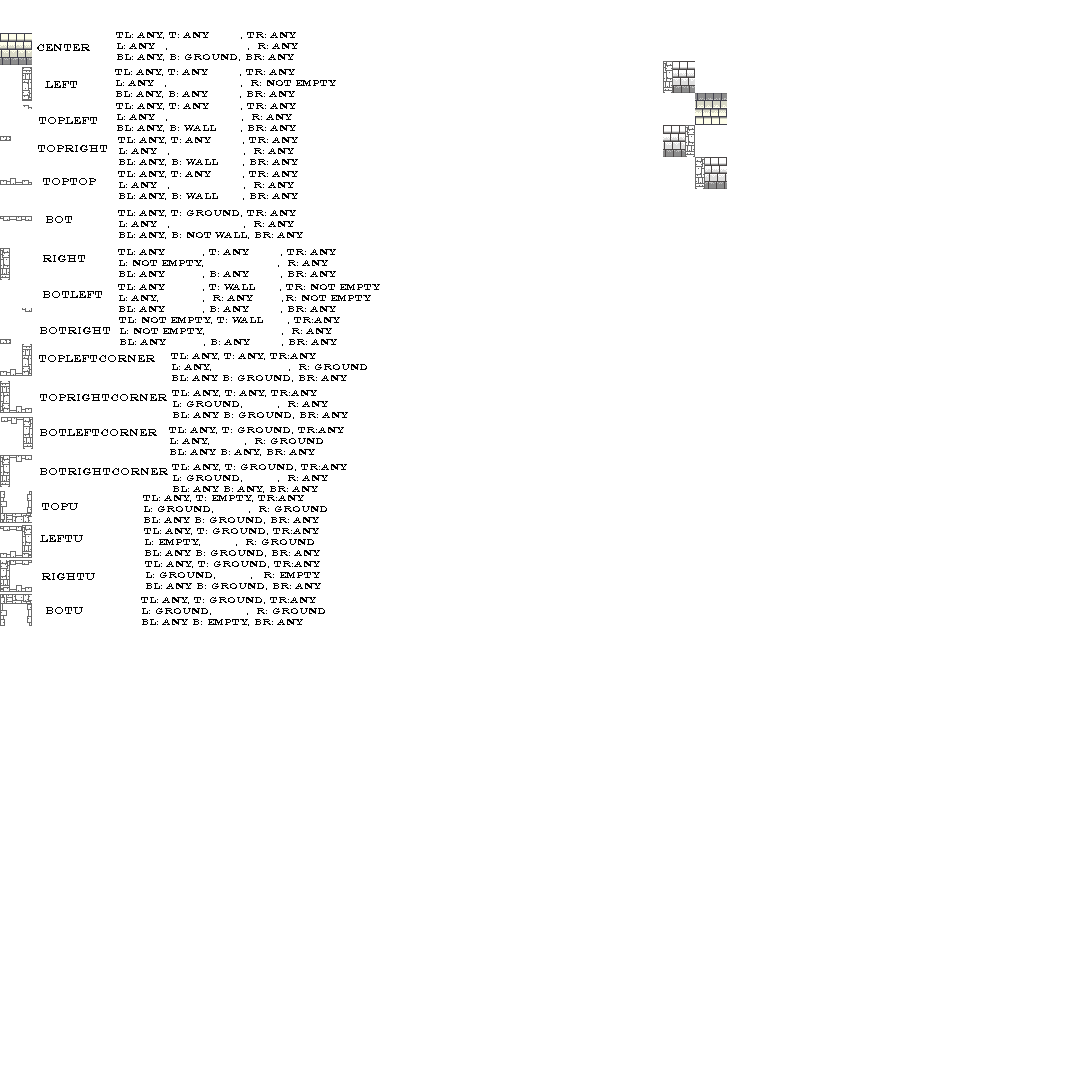
<style>
.page{position:relative;width:1080px;height:1080px;background:#ffffff}
.page>*{position:absolute;margin:0}
.t1{font:9px "EngraversMT";color:#000000}
.t2{font:10px "EngraversMT";color:#000000}
</style>
<div class="page">
<p class="t1" style="left:116px;top:32px;width:182px;height:29px">TL: Any, T: Any          , TR: Any<br>L: Any   ,                          ,  R: ANy<br>BL: Any, B: Ground, BR: Any</p>
<p class="t2" style="left:37px;top:44px;width:53px;height:7px">Center</p>
<p class="t1" style="left:115px;top:69px;width:221px;height:29px">TL: Any, T: Any          , TR: Any<br>L: Any   ,                        ,  R: not empty<br>BL: Any, B: any          , BR: Any</p>
<p class="t2" style="left:45px;top:81px;width:32px;height:7px">Left</p>
<p class="t1" style="left:116px;top:103px;width:180px;height:29px">TL: Any, T: Any          , TR: Any<br>L: Any   ,                        ,  R: Any<br>BL: Any, B: Wall        , BR: Any</p>
<p class="t2" style="left:39px;top:117px;width:58px;height:7px">TopLEFT</p>
<p class="t1" style="left:118px;top:137px;width:180px;height:29px">TL: Any, T: Any          , TR: Any<br>L: Any   ,                        ,  R: Any<br>BL: Any, B: Wall        , BR: Any</p>
<p class="t2" style="left:38px;top:145px;width:69px;height:7px">TopRight</p>
<p class="t1" style="left:118px;top:171px;width:180px;height:29px">TL: Any, T: Any          , TR: Any<br>L: Any   ,                        ,  R: ANY<br>BL: Any, B: Wall        , BR: Any</p>
<p class="t2" style="left:43px;top:178px;width:53px;height:7px">TopTop</p>
<p class="t2" style="left:46px;top:216px;width:26px;height:7px">Bot</p>
<p class="t1" style="left:118px;top:210px;width:185px;height:29px">TL: Any, T: Ground, TR: Any<br>L: Any   ,                        ,  R: ANY<br>BL: Any, B: Not WALL, BR: Any</p>
<p class="t2" style="left:43px;top:255px;width:42px;height:7px">Right</p>
<p class="t1" style="left:118px;top:249px;width:218px;height:29px">TL: Any            , T: Any          , TR: Any<br>L: Not Empty,                        ,  R: ANY<br>BL: Any            , B: any          , BR: Any</p>
<p class="t2" style="left:43px;top:291px;width:59px;height:7px">BotLEft</p>
<p class="t1" style="left:118px;top:284px;width:262px;height:29px">TL: Any            , T: Wall        , TR: Not Empty<br>L: any,              ,  R: ANY         ,R: Not Empty<br>BL: Any            , B: any          , BR: Any</p>
<p class="t1" style="left:119px;top:317px;width:221px;height:29px">TL: Not Empty, T: Wall        , TR:Any <br>L: Not Empty,                         ,  R: ANY<br>BL: Any            , B: any          , BR: Any</p>
<p class="t2" style="left:40px;top:327px;width:70px;height:7px">BotRight</p>
<p class="t1" style="left:171px;top:353px;width:196px;height:29px">TL: ANY, T: ANY, TR:Any <br>L: ANY,                         ,  R: Ground<br>BL: Any B: Ground, BR: Any</p>
<p class="t2" style="left:39px;top:355px;width:116px;height:7px">TopLeftCorner</p>
<p class="t1" style="left:172px;top:390px;width:176px;height:29px">TL: ANY, T: ANY, TR:Any <br>L: Ground,           ,  R: Any<br>BL: Any B: Ground, BR: Any</p>
<p class="t2" style="left:40px;top:394px;width:127px;height:7px">TOPRightCORNER</p>
<p class="t2" style="left:40px;top:429px;width:117px;height:7px">BotLeftCorner</p>
<p class="t1" style="left:169px;top:427px;width:175px;height:29px">TL: ANY, T: Ground, TR:Any <br>L: ANY,           ,  R: Ground<br>BL: Any B: ANY, BR: Any</p>
<p class="t2" style="left:40px;top:468px;width:128px;height:7px">BotRightCorner</p>
<p class="t1" style="left:172px;top:464px;width:175px;height:29px">TL: ANY, T: Ground, TR:Any <br>L: Ground,           ,  R: ANY<br>BL: Any B: ANY, BR: Any</p>
<p class="t1" style="left:143px;top:495px;width:184px;height:29px">TL: ANY, T: Empty, TR:Any <br>L: Ground,           ,  R: Ground<br>BL: Any B: Ground, BR: Any</p>
<p class="t2" style="left:42px;top:503px;width:36px;height:7px">TopU</p>
<p class="t1" style="left:144px;top:528px;width:176px;height:29px">TL: ANY, T: Ground, TR:Any <br>L: Empty,           ,  R: Ground<br>BL: Any B: Ground, BR: Any</p>
<p class="t2" style="left:40px;top:535px;width:43px;height:7px">LeftU</p>
<p class="t1" style="left:145px;top:561px;width:176px;height:29px">TL: ANY, T: Ground, TR:Any <br>L: Ground,           ,   R: Empty<br>BL: Any B: Ground, BR: Any</p>
<p class="t2" style="left:42px;top:573px;width:53px;height:7px">RightU</p>
<p class="t1" style="left:141px;top:597px;width:184px;height:29px">TL: ANY, T: Ground, TR:Any <br>L: Ground,           ,  R: Ground<br>BL: Any B: Empty, BR: Any</p>
<p class="t2" style="left:46px;top:607px;width:37px;height:7px">BOTU</p>
</div>
